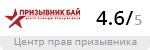
<style>
.page{position:relative;width:150px;height:50px;background:#ffffff}
.page>*{position:absolute;margin:0}
.t1{font:20px "OpenSans-SemiBold";letter-spacing:0.02em;color:#000000}
.t2{font:14px "OpenSans-SemiBold";letter-spacing:0.02em;color:#a3a3a3}
.t3{font:10px "OpenSans-Regular";letter-spacing:0.02em;color:#989aa4}
</style>
<div class="page">
<p class="t1" style="left:96px;top:11px;width:37px;height:14px">4.6/</p>
<p class="t2" style="left:135px;top:15px;width:7px;height:10px">5</p>
<p class="t3" style="left:14px;top:38px;width:123px;height:9px">Центр прав призывника</p>
</div>
